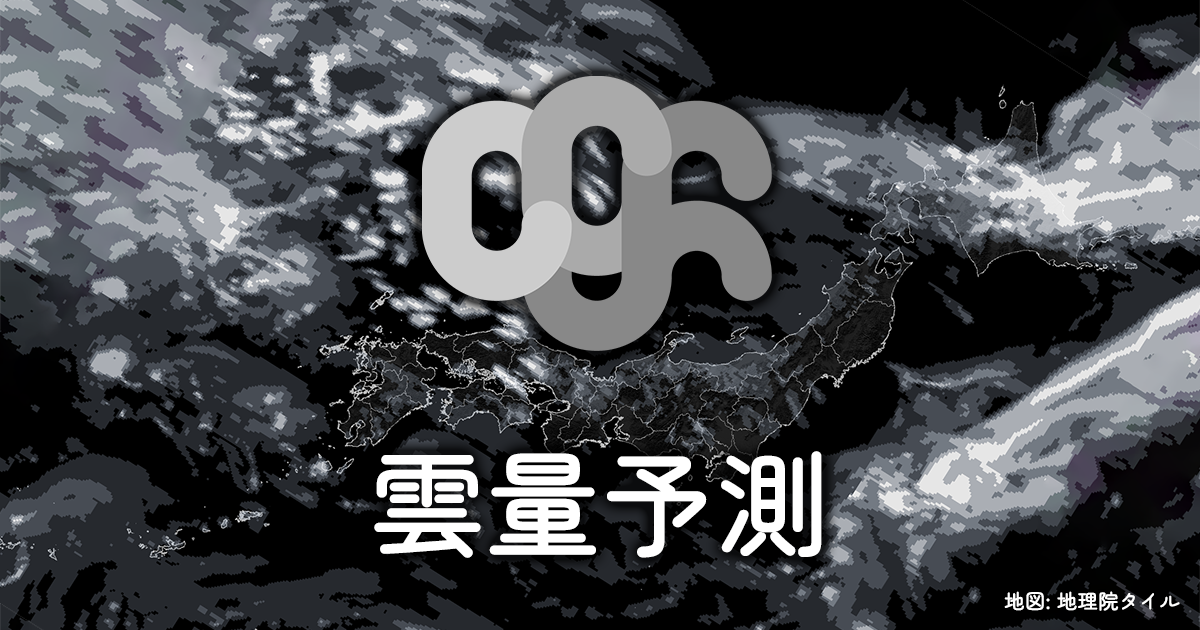
<style>
.page{position:relative;width:1200px;height:630px;background:#000000}
.page>*{position:absolute;margin:0}
.t1{font:112.5px "ZenMaruGothic-Regular";color:#ffffff;font-weight:bold}
.t2{font:20px "ZenMaruGothic-Regular";color:#ffffff;font-weight:bold}
</style>
<div class="page">
<p class="t1" style="left:374px;top:451px;width:448px;height:107px">雲量予測</p>
<p class="t2" style="left:1004px;top:591px;width:176px;height:20px">地図: 地理院タイル</p>
</div>
